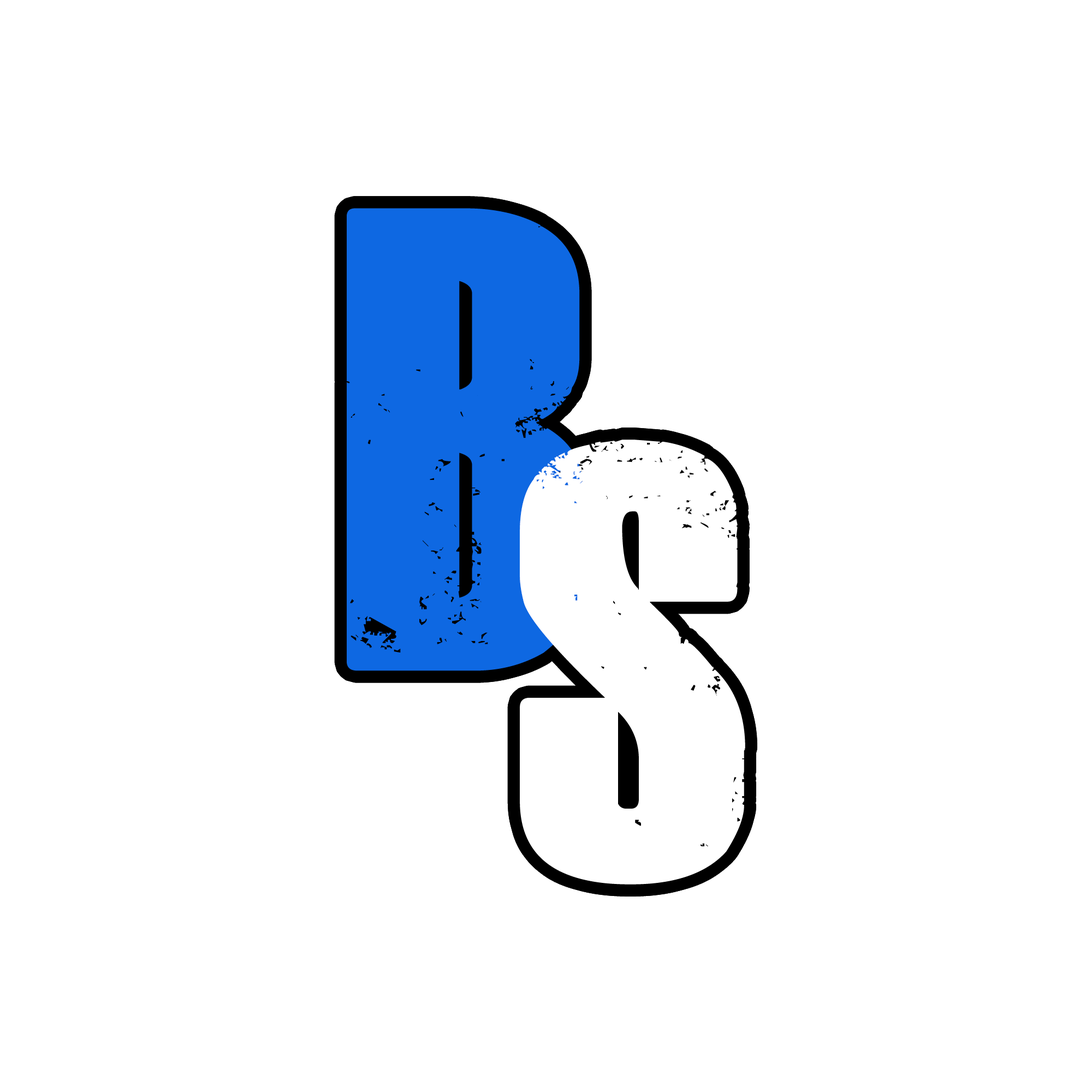
<style>
.page{position:relative;width:1092px;height:1092px;background:#ffffff}
.page>*{position:absolute;margin:0}
.t1{font:452.9px "DeadKansas";color:#0e68e2}
.t2{font:436px "DeadKansas";color:#ffffff}
</style>
<div class="page">
<p class="t1" style="left:347px;top:208px;width:236px;height:463px">B</p>
<p class="t2" style="left:520px;top:440px;width:225px;height:445px">S</p>
</div>
